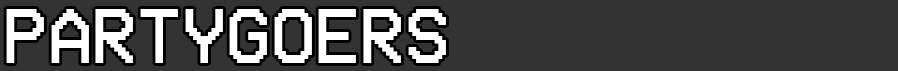
<style>
.page{position:relative;width:898px;height:71px;background:#333333}
.page>*{position:absolute;margin:0}
.t1{font:78.8px "VCROSDMono";color:#ffffff;scale:0.97 1}
</style>
<div class="page">
<p class="t1" style="left:6px;top:9px;width:440px;height:54px">PARTYGOERS</p>
</div>
